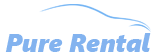
<style>
.page{position:relative;width:156px;height:56px;background:#ffffff}
.page>*{position:absolute;margin:0}
.t1{font:25.1px "SegoeUIBlack-Italic";color:#83b3ef}
</style>
<div class="page">
<p class="t1" style="left:5px;top:33px;width:146px;height:19px">Pure Rental</p>
</div>
